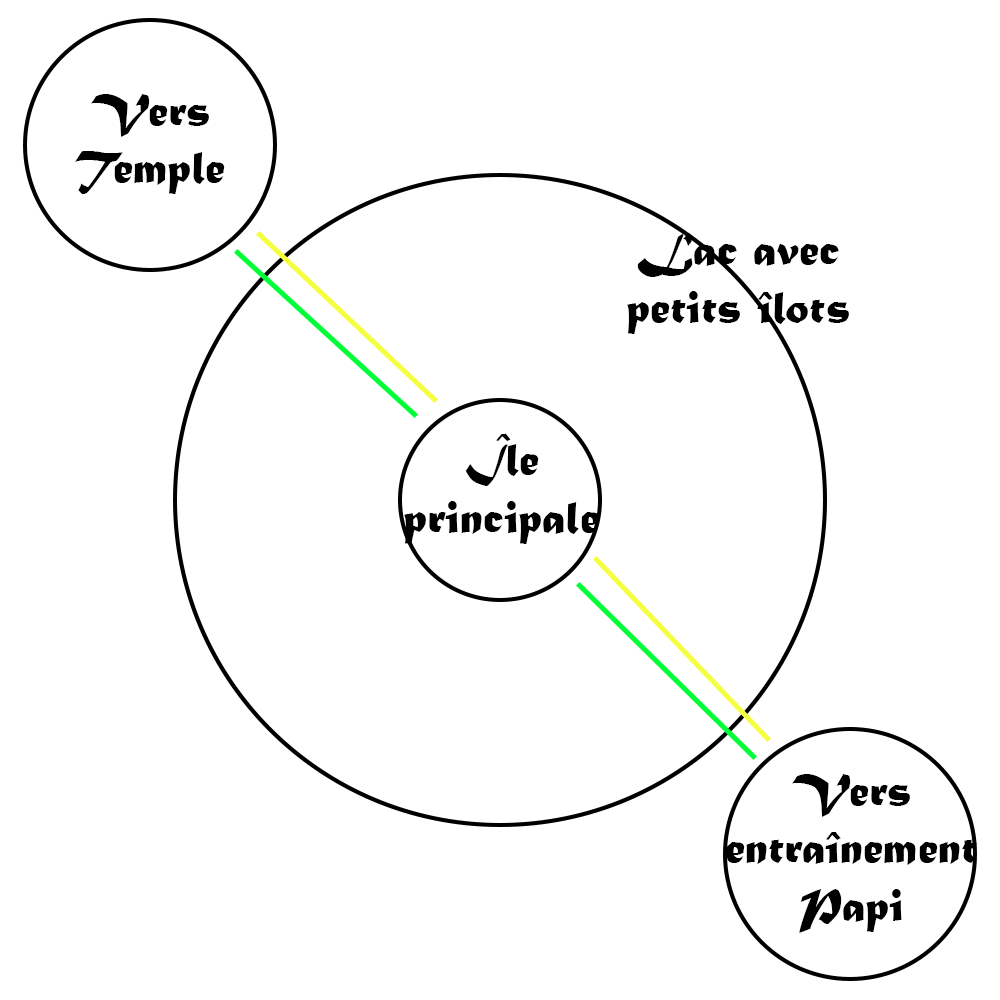
<style>
.page{position:relative;width:1000px;height:1000px;background:#ffffff}
.page>*{position:absolute;margin:0}
.t1{font:48px "MaturaMTScriptCapitals";color:#000000}
</style>
<div class="page">
<p class="t1" style="left:75px;top:94px;width:150px;height:100px;text-align:center">Vers<br>Temple</p>
<p class="t1" style="left:627px;top:233px;width:222px;height:101px;text-align:center">Lac avec<br>petits îlots</p>
<p class="t1" style="left:404px;top:433px;width:196px;height:111px;text-align:center">Île<br>principale</p>
<p class="t1" style="left:726px;top:774px;width:251px;height:159px;text-align:center">Vers<br>entraînement<br>Papi</p>
</div>
